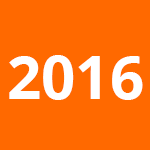
<style>
.page{position:relative;width:150px;height:150px;background:#ff6900}
.page>*{position:absolute;margin:0}
.t1{font:60px "OpenSans-Bold";color:#ffffff}
</style>
<div class="page">
<p class="t1" style="left:9px;top:55px;width:134px;height:45px">2016</p>
</div>
